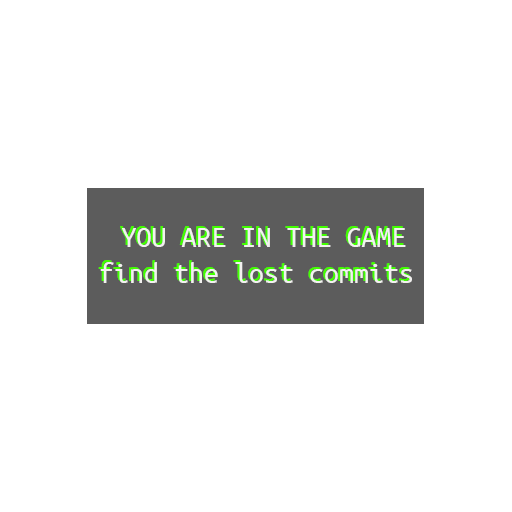
<style>
.page{position:relative;width:512px;height:512px;background:#ffffff}
.page>*{position:absolute;margin:0}
.t1{font:30px "UbuntuMono-Regular";color:#42ff00}
.t2{font:30px "UbuntuMono-Regular";color:#f2f1ef}
</style>
<div class="page">
<p class="t1" style="left:98px;top:226px;width:312px;height:55px;text-align:center">YOU ARE IN THE GAME<br>find the lost commits</p>
<p class="t2" style="left:100px;top:228px;width:312px;height:55px;text-align:center">YOU ARE IN THE GAME<br>find the lost commits</p>
</div>
